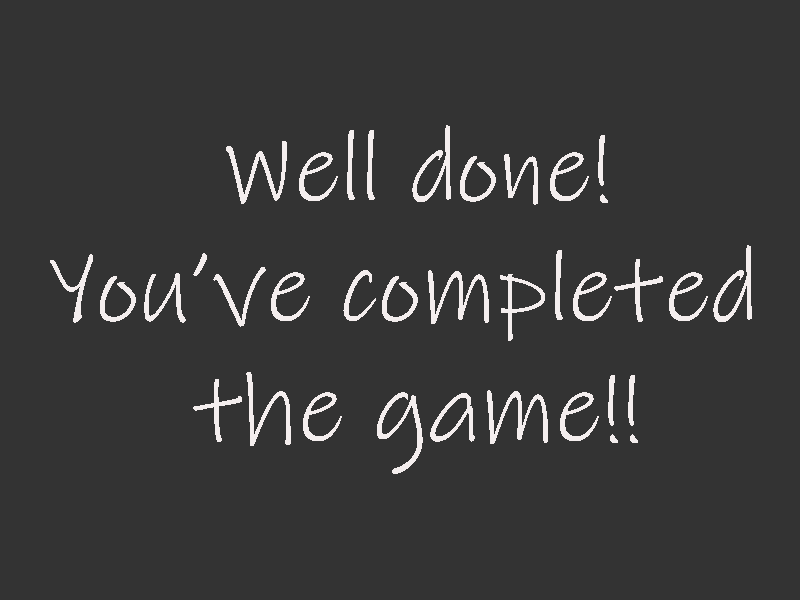
<style>
.page{position:relative;width:800px;height:600px;background:#333333}
.page>*{position:absolute;margin:0}
.t1{font:100px "InkFree";color:#f4eeee}
</style>
<div class="page">
<p class="t1" style="left:50px;top:125px;width:702px;height:349px;text-align:center">Well done!<br>You’ve completed <br>the game!!</p>
</div>
